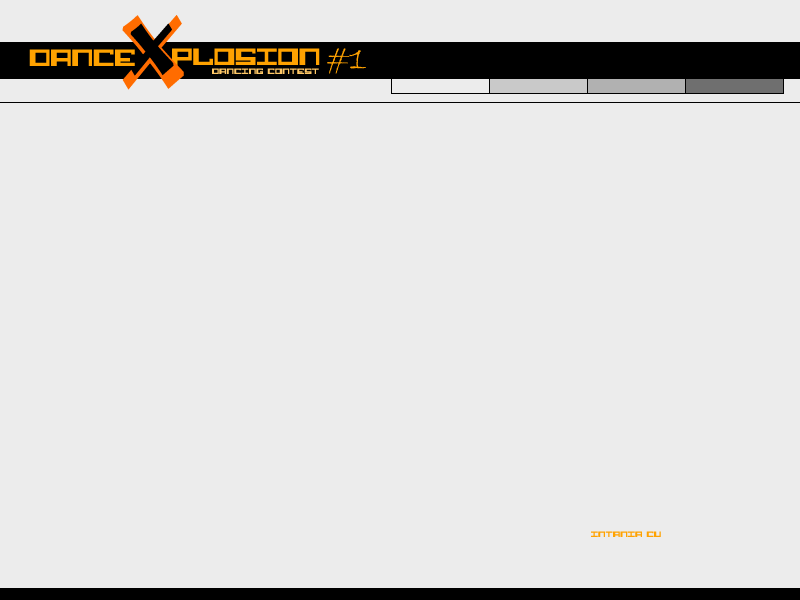
<style>
.page{position:relative;width:800px;height:600px;background:#ececec}
.page>*{position:absolute;margin:0}
.t1{font:102px "BremenBT-Bold"}
.t2{font:71.1px "BremenBT-Bold";color:#000000}
.t3{font:36px "Alphastep";letter-spacing:0.025em;color:#ffa200}
.t4{font:36px "BradleyHandITC";color:#ffa200}
.t5{font:12px "Alphastep";letter-spacing:0.05em;color:#ffc867}
.t6{font:12px "Alphastep";letter-spacing:0.05em;color:#ffa200}
</style>
<div class="page">
<p class="t1" style="left:122px;top:15px;width:62px;height:75px">X</p>
<p class="t2" style="left:130px;top:23px;width:44px;height:53px">X</p>
<p class="t3" style="left:29px;top:49px;width:106px;height:17px">DANCE</p>
<p class="t3" style="left:172px;top:48px;width:148px;height:17px">PLOSION</p>
<p class="t4" style="left:327px;top:48px;width:39px;height:26px">#1</p>
<p class="t5" style="left:212px;top:68px;width:107px;height:6px">DANCING CONTEST</p>
<p class="t6" style="left:591px;top:531px;width:70px;height:6px">INTANIA CU</p>
</div>
